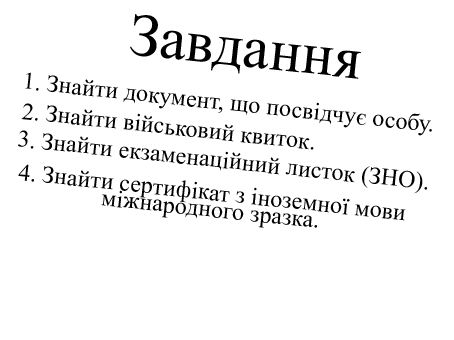
<style>
.page{position:relative;width:454px;height:340px;background:#ffffff}
.page>*{position:absolute;margin:0}
.t1{font:60px "TimesNewRomanPSMT";color:#000000}
.t2{font:24px "TimesNewRomanPSMT";color:#000000}
.t3{font:24px/16.7px "TimesNewRomanPSMT";color:#000000}
</style>
<div class="page">
<p class="t1" style="left:130px;top:14px;width:231px;height:65px;rotate:6deg">Завдання</p>
<p class="t2" style="left:25px;top:72px;width:407px;height:64px;rotate:6deg">1. Знайти документ, що посвідчує особу.</p>
<p class="t2" style="left:21px;top:103px;width:293px;height:47px;rotate:6deg">2. Знайти військовий квиток.</p>
<p class="t2" style="left:18px;top:130px;width:409px;height:64px;rotate:6deg">3. Знайти екзаменаційний листок (ЗНО).</p>
<p class="t3" style="left:18px;top:164px;width:388px;height:64px;text-align:center;rotate:6deg">4. Знайти сертифікат з іноземної мови<br>міжнародного зразка.</p>
</div>
